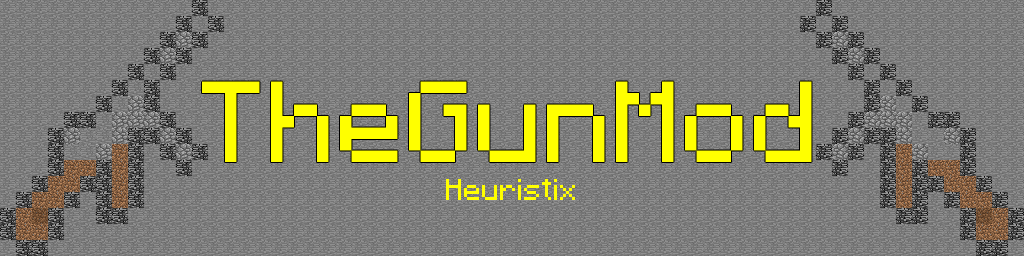
<style>
.page{position:relative;width:1024px;height:256px;background:#7f7f7f}
.page>*{position:absolute;margin:0}
.t1{font:92px "Minecraft";color:#ffff00}
.t2{font:24px "Minecraft";color:#ffff00}
</style>
<div class="page">
<p class="t1" style="left:202px;top:81px;width:610px;height:81px">TheGunMod</p>
<p class="t2" style="left:446px;top:179px;width:129px;height:21px">Heuristix</p>
</div>
